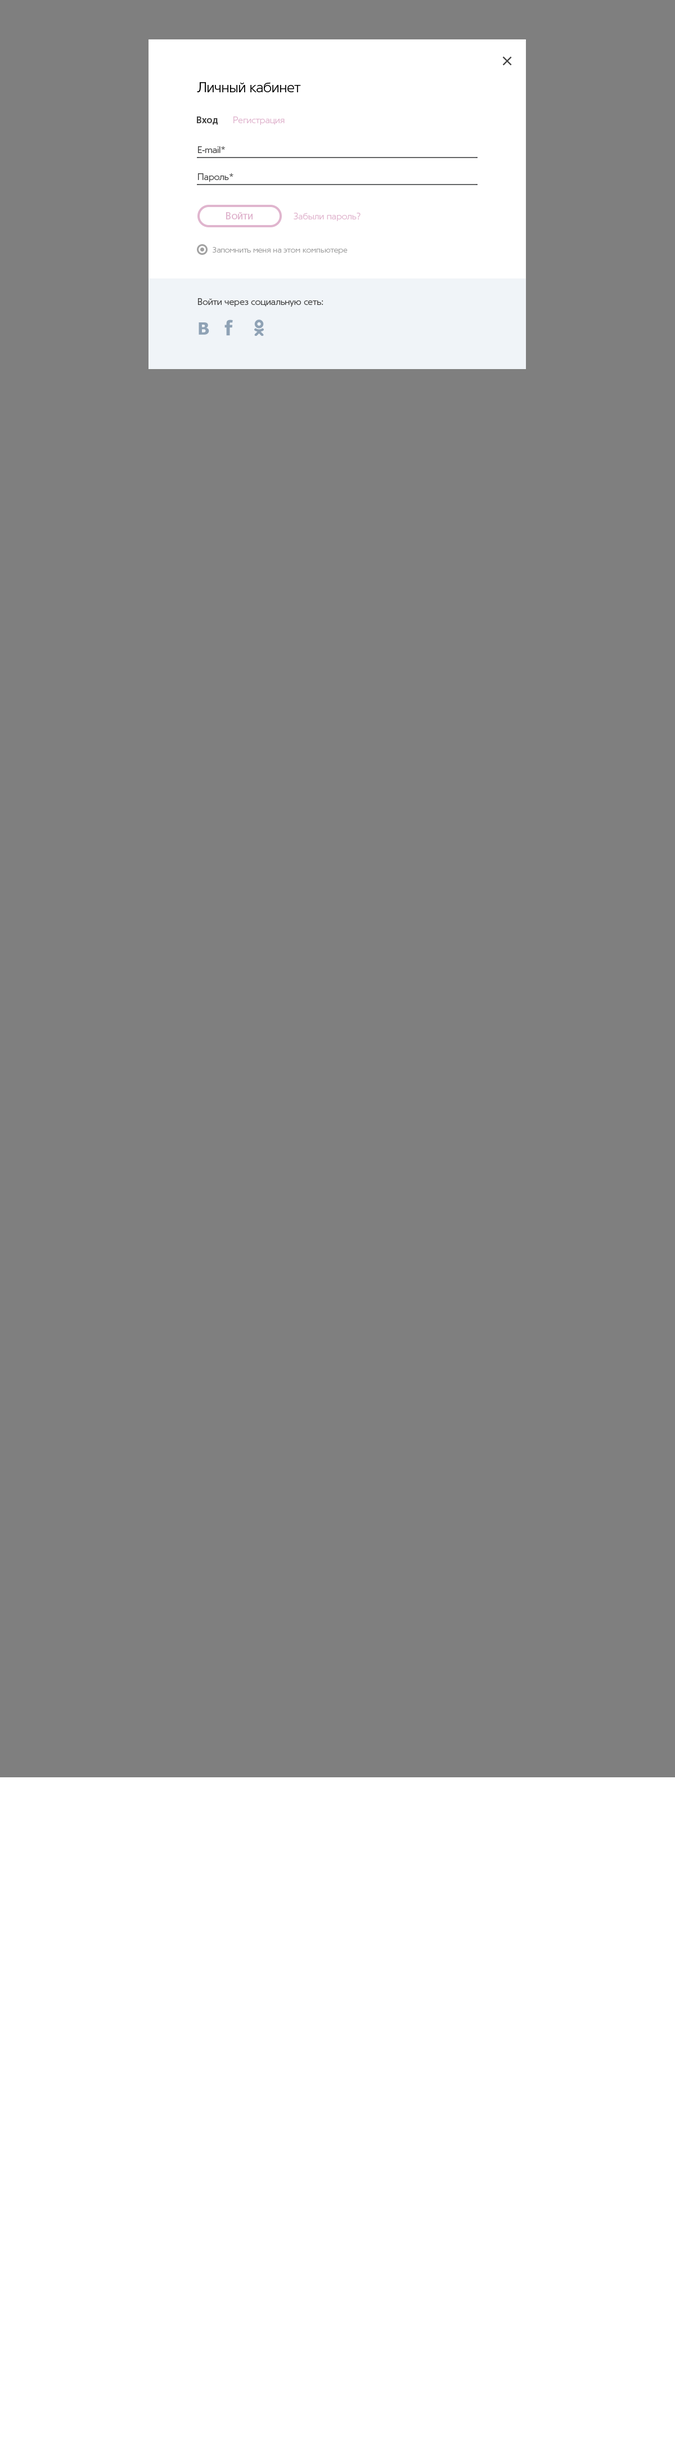
<style>
.page{position:relative;width:675px;height:2444px;background:#7f7f7f}
.page>*{position:absolute;margin:0}
.t1{font:22.4px "TornadoCyr-Light";color:#414141}
.t2{font:13.6px "TornadoCyr-Light";color:#000000}
.t3{font:9px "TornadoCyr-Light";color:#e0b5ce}
.t4{font:9px "TornadoCyr-Bold";color:#414141}
.t5{font:9px/13.5px "TornadoCyr-Light";color:#414141}
.t6{font:10.1px "TornadoCyr-Regular";color:#e0b5ce}
.t7{font:7.9px "TornadoCyr-Light";color:#a1a1a1}
.t8{font:9px "TornadoCyr-Light";color:#414141}
</style>
<div class="page">
<p class="t1" style="left:502px;top:56px;width:10px;height:10px;rotate:45deg">+</p>
<p class="t2" style="left:197px;top:82px;width:104px;height:10px">Личный кабинет</p>
<p class="t3" style="left:197px;top:116px;width:88px;height:9px"><span class="t4">Вход</span>      Регистрация</p>
<p class="t5" style="left:198px;top:146px;width:35px;height:36px">E-mail*<br><br>Пароль*</p>
<p class="t6" style="left:226px;top:212px;width:27px;height:7px">Войти</p>
<p class="t3" style="left:294px;top:213px;width:67px;height:8px">Забыли пароль?</p>
<p class="t7" style="left:213px;top:247px;width:135px;height:7px">Запомнить меня на этом компьютере</p>
<p class="t8" style="left:198px;top:298px;width:125px;height:9px">Войти через социальную сеть:</p>
</div>
